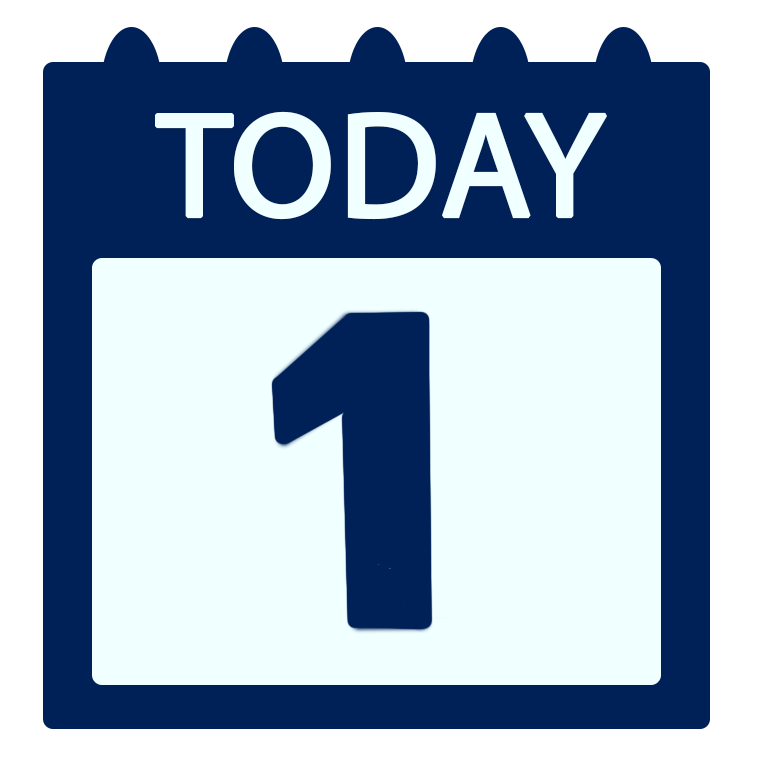
<style>
.page{position:relative;width:761px;height:765px;background:#002157}
.page>*{position:absolute;margin:0}
.t1{font:150px "MyriadPro-Regular";color:#f0ffff;font-weight:bold}
</style>
<div class="page">
<p class="t1" style="left:155px;top:111px;width:452px;height:109px">TODAY</p>
</div>
